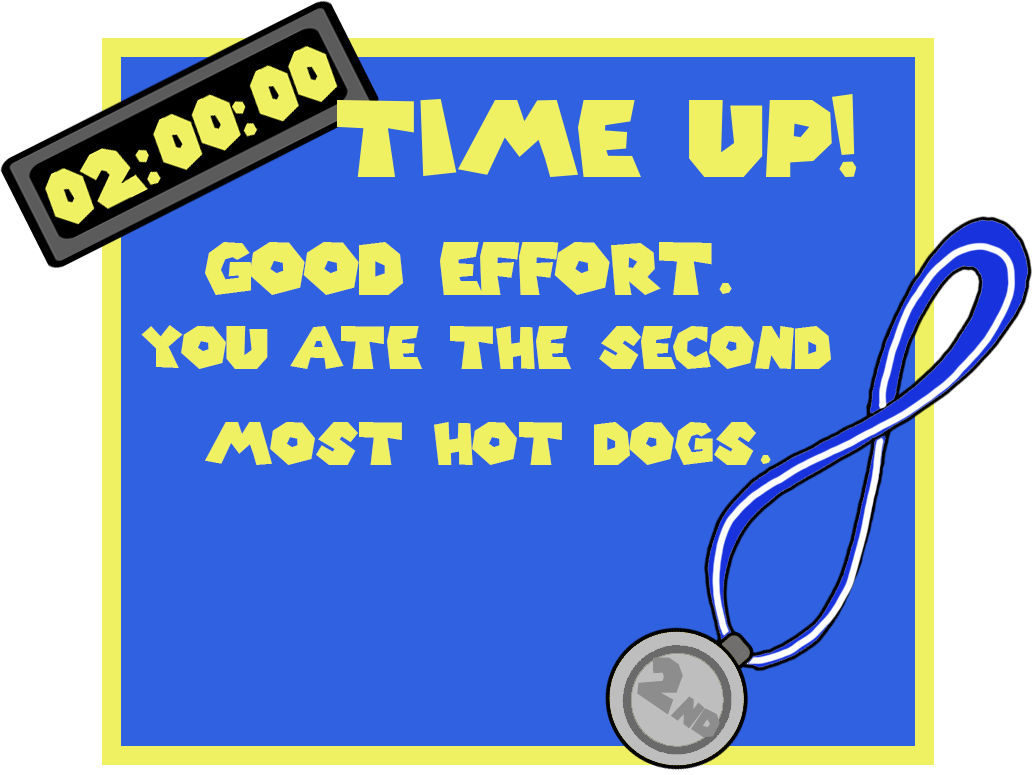
<style>
.page{position:relative;width:1035px;height:775px;background:#2f61e1}
.page>*{position:absolute;margin:0}
.t1{font:70.9px "SuperMarioGalaxy";color:#eff163}
.t2{font:58.4px/96px "SuperMarioGalaxy";color:#eff163}
.t3{font:36.1px "SuperMarioGalaxy";color:#8d8d8d}
.t4{font:64.4px "SuperMarioGalaxy";color:#8d8d8d}
</style>
<div class="page">
<p class="t1" style="left:205px;top:242px;width:527px;height:53px">Good effort.</p>
<p class="t2" style="left:141px;top:325px;width:690px;height:140px;text-align:center">you ate the second<br>most hot dogs.</p>
<p class="t3" style="left:637px;top:657px;width:83px;height:81px;rotate:34deg"><span class="t4">2</span>nd</p>
</div>
